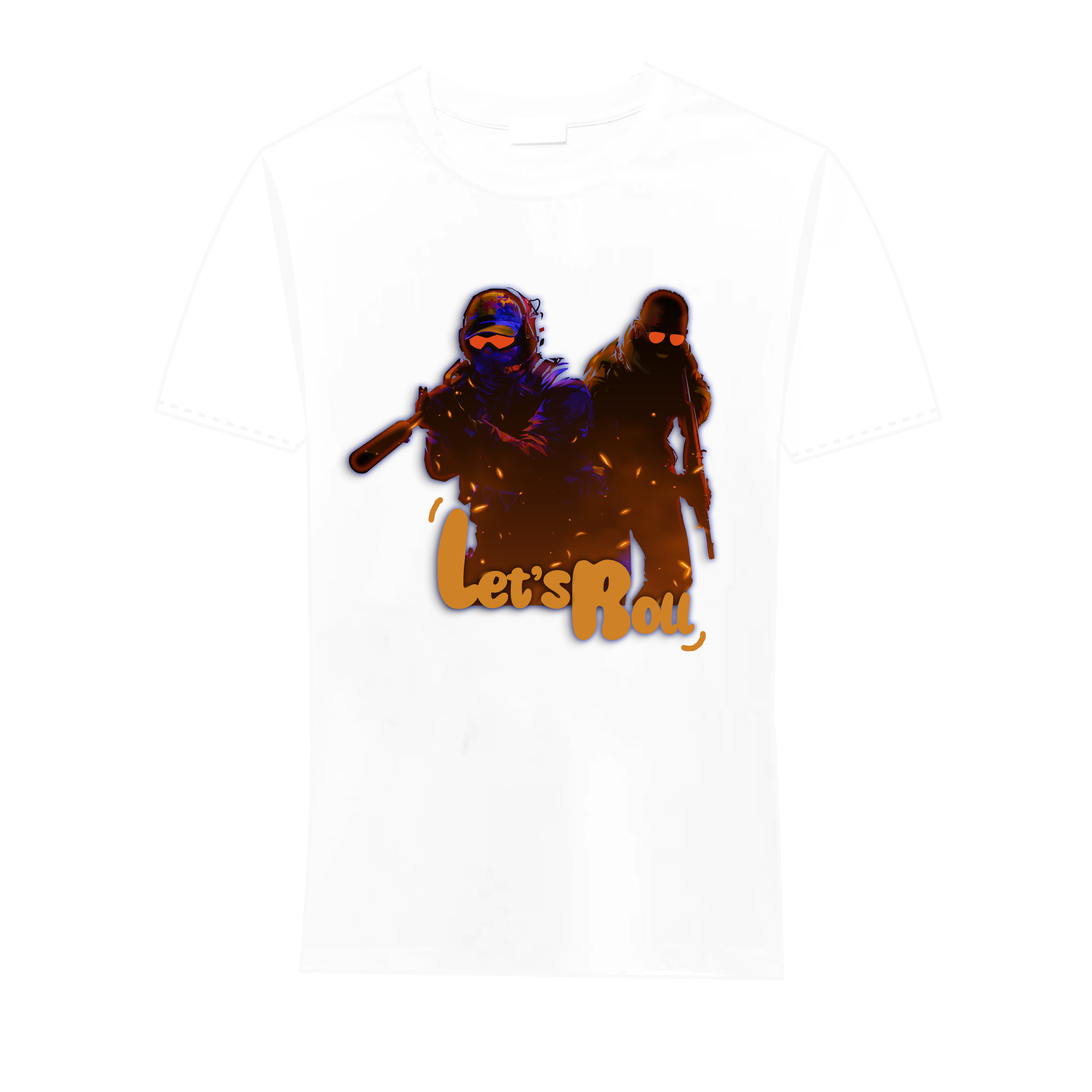
<style>
.page{position:relative;width:1092px;height:1092px;background:#ffffff}
.page>*{position:absolute;margin:0}
.t1{font:54.6px "SuperBubbly";letter-spacing:-0.05em;color:#cf8125;font-weight:bold}
.t2{font:131px "SuperBubbly";letter-spacing:-0.05em;color:#cf8125;font-weight:bold}
.t3{font:109.2px "SuperBubbly";letter-spacing:-0.05em;color:#cf8125;font-weight:bold}
</style>
<div class="page">
<p class="t1" style="left:437px;top:508px;width:133px;height:101px"><span class="t2">l</span>et’s</p>
<p class="t1" style="left:572px;top:560px;width:123px;height:80px"><span class="t3">R</span>oll</p>
</div>
